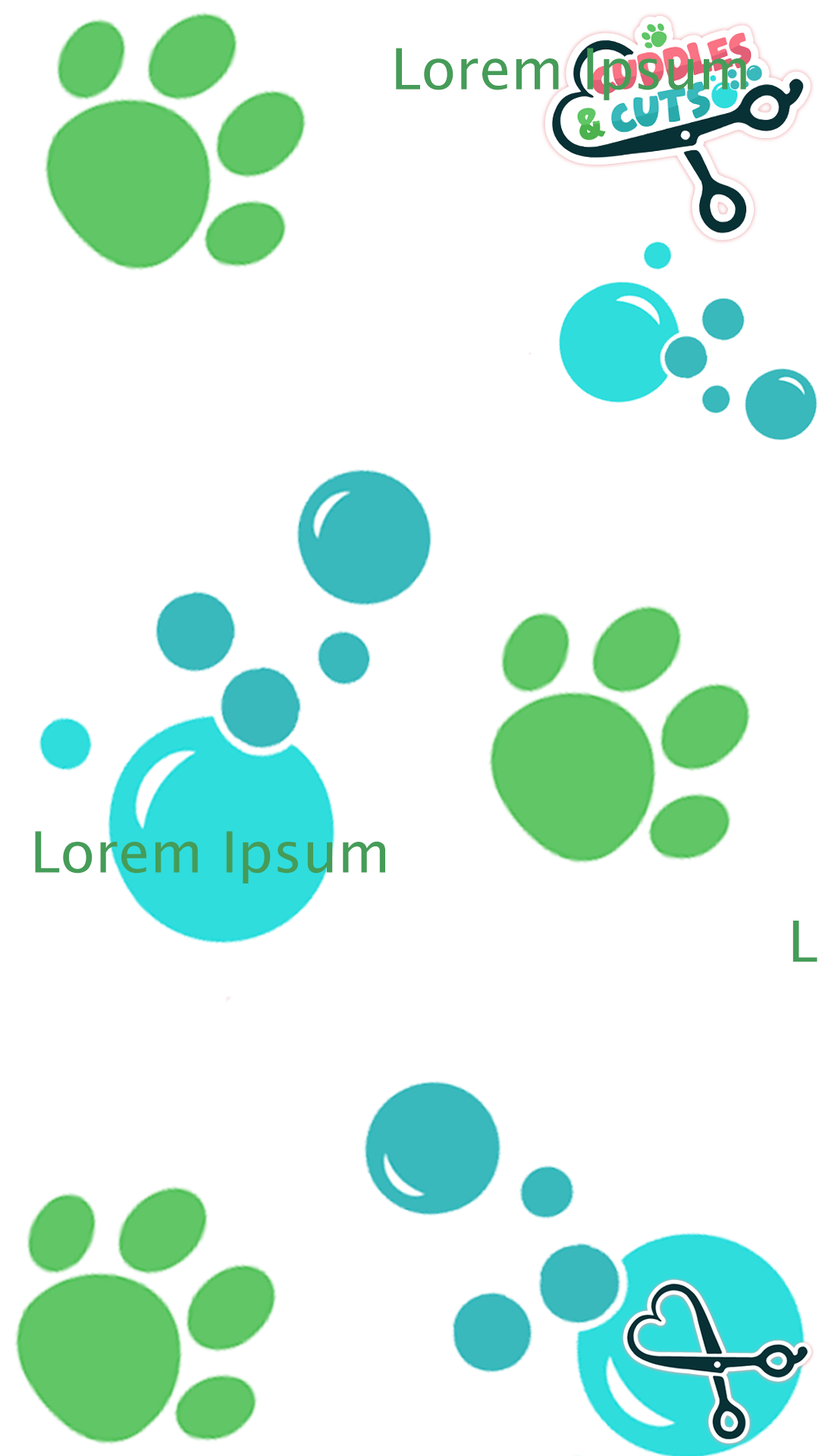
<style>
.page{position:relative;width:819px;height:1456px;background:#ffffff}
.page>*{position:absolute;margin:0}
.t1{font:56.9px "LucidaSans";color:#459c58}
</style>
<div class="page">
<p class="t1" style="left:396px;top:48px;width:350px;height:53px">Lorem Ipsum</p>
<p class="t1" style="left:35px;top:831px;width:350px;height:52px">Lorem Ipsum</p>
</div>
